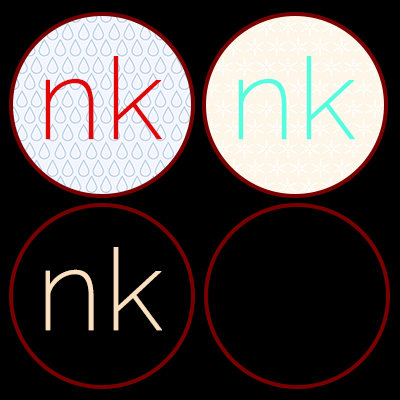
<style>
.page{position:relative;width:400px;height:400px;background:#000000}
.page>*{position:absolute;margin:0}
.t1{font:113.3px "Raleway-ExtraLight";color:#df0707;font-weight:bold}
.t2{font:113.3px "Raleway-ExtraLight";color:#56fcdf;font-weight:bold}
.t3{font:113.3px "Raleway-ExtraLight";color:#fbe0c0;font-weight:bold}
</style>
<div class="page">
<p class="t1" style="left:45px;top:56px;width:117px;height:84px">nk</p>
<p class="t2" style="left:238px;top:56px;width:117px;height:84px">nk</p>
<p class="t3" style="left:45px;top:247px;width:117px;height:84px">nk</p>
</div>
